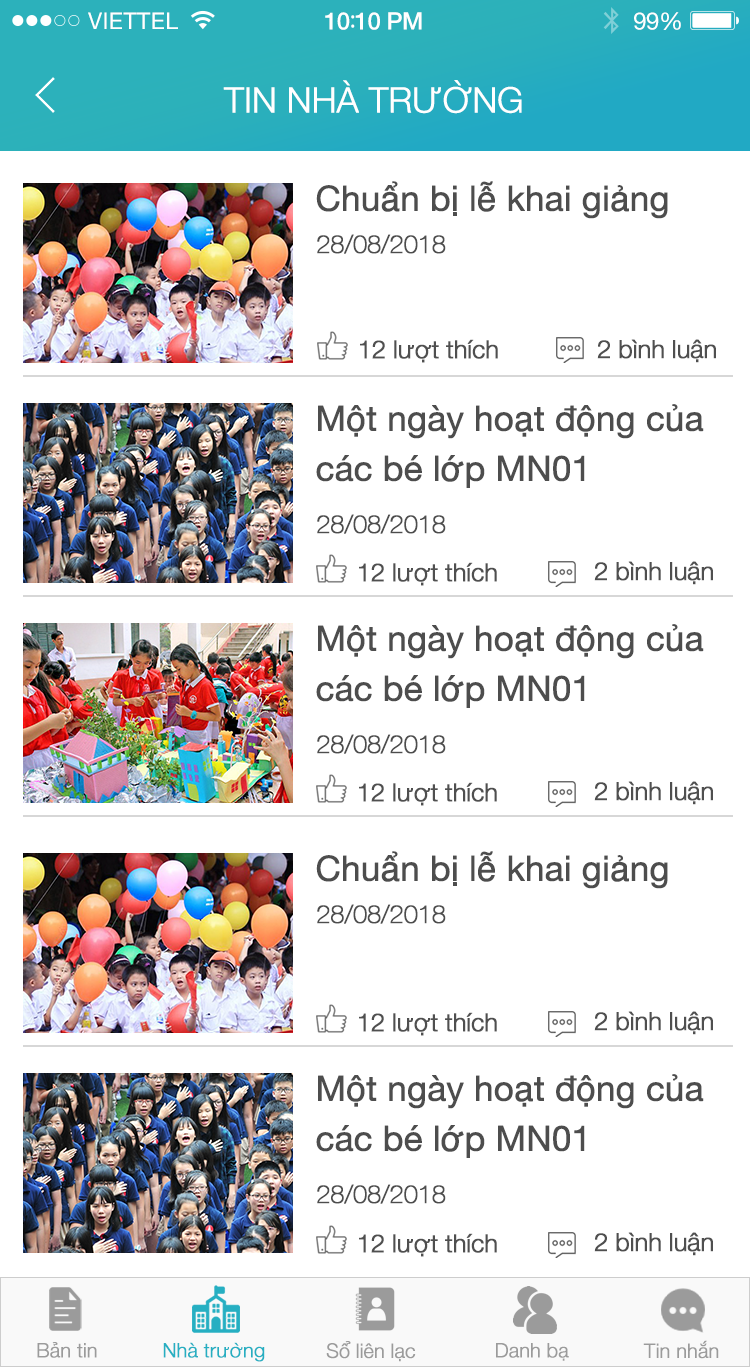
<style>
.page{position:relative;width:750px;height:1367px;background:#ffffff}
.page>*{position:absolute;margin:0}
.t1{font:23px "HelveticaNeue";letter-spacing:0.02em;color:#ffffff}
.t2{font:24px "HelveticaNeue-Medium";letter-spacing:-0.02em;color:#ffffff}
.t3{font:26px "MyriadPro-Regular";letter-spacing:-0.02em;color:#ffffff}
.t4{font:24px "HelveticaNeue";letter-spacing:-0.02em;color:#ffffff}
.t5{font:35px "HelveticaNeue-Light";letter-spacing:-0.02em;color:#ffffff;font-weight:bold}
.t6{font:35px "HelveticaNeue";letter-spacing:-0.02em;color:#4d4d4d;font-weight:bold}
.t7{font:25px "HelveticaNeue-Thin";letter-spacing:-0.02em;color:#4d4d4d;font-weight:bold}
.t8{font:25px "HelveticaNeue-Light";letter-spacing:-0.02em;color:#4f4f4f;font-weight:bold}
.t9{font:35px/50px "HelveticaNeue";letter-spacing:-0.02em;color:#4d4d4d;font-weight:bold}
.t10{font:20px "HelveticaNeue-Light";letter-spacing:-0.02em;color:#9b9b9b;font-weight:bold}
.t11{font:20px "HelveticaNeue-Light";letter-spacing:-0.02em;color:#26afc2;font-weight:bold}
</style>
<div class="page">
<p class="t1" style="left:88px;top:12px;width:90px;height:17px">VIETTEL</p>
<p class="t2" style="left:325px;top:12px;width:97px;height:18px">10<span class="t3">:</span>10 PM</p>
<p class="t4" style="left:634px;top:12px;width:47px;height:18px">99%</p>
<p class="t5" style="left:223px;top:80px;width:299px;height:34px">TIN NHÀ TRƯỜNG</p>
<p class="t6" style="left:316px;top:181px;width:352px;height:38px">Chuẩn bị lễ khai giảng</p>
<p class="t7" style="left:317px;top:234px;width:129px;height:20px">28/08/2018</p>
<p class="t8" style="left:360px;top:339px;width:138px;height:24px">12 lượt thích</p>
<p class="t8" style="left:597px;top:339px;width:119px;height:24px">2 bình luận</p>
<p class="t9" style="left:316px;top:404px;width:388px;height:84px">Một ngày hoạt động của<br>các bé lớp MN01</p>
<p class="t7" style="left:317px;top:514px;width:129px;height:20px">28/08/2018</p>
<p class="t8" style="left:359px;top:562px;width:138px;height:24px">12 lượt thích</p>
<p class="t8" style="left:594px;top:561px;width:119px;height:24px">2 bình luận</p>
<p class="t9" style="left:316px;top:624px;width:388px;height:84px">Một ngày hoạt động của<br>các bé lớp MN01</p>
<p class="t7" style="left:317px;top:734px;width:129px;height:20px">28/08/2018</p>
<p class="t8" style="left:359px;top:782px;width:138px;height:24px">12 lượt thích</p>
<p class="t8" style="left:594px;top:781px;width:119px;height:24px">2 bình luận</p>
<p class="t6" style="left:316px;top:851px;width:352px;height:38px">Chuẩn bị lễ khai giảng</p>
<p class="t7" style="left:317px;top:904px;width:129px;height:20px">28/08/2018</p>
<p class="t8" style="left:359px;top:1012px;width:138px;height:24px">12 lượt thích</p>
<p class="t8" style="left:594px;top:1011px;width:119px;height:24px">2 bình luận</p>
<p class="t9" style="left:316px;top:1074px;width:388px;height:84px">Một ngày hoạt động của<br>các bé lớp MN01</p>
<p class="t7" style="left:317px;top:1184px;width:129px;height:20px">28/08/2018</p>
<p class="t8" style="left:359px;top:1233px;width:138px;height:24px">12 lượt thích</p>
<p class="t8" style="left:594px;top:1232px;width:119px;height:24px">2 bình luận</p>
<p class="t10" style="left:37px;top:1342px;width:60px;height:16px">Bản tin</p>
<p class="t11" style="left:163px;top:1342px;width:102px;height:20px">Nhà trường</p>
<p class="t10" style="left:326px;top:1341px;width:90px;height:21px">Sổ liên lạc</p>
<p class="t10" style="left:496px;top:1343px;width:73px;height:18px">Danh bạ</p>
<p class="t10" style="left:643px;top:1340px;width:76px;height:19px">Tin nhắn</p>
</div>
